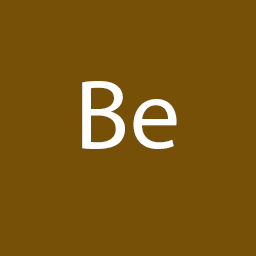
<style>
.page{position:relative;width:256px;height:256px;background:#765007}
.page>*{position:absolute;margin:0}
.t1{font:100px "MyriadPro-Regular";color:#ffffff}
</style>
<div class="page">
<p class="t1" style="left:82px;top:81px;width:95px;height:68px">Be</p>
</div>
